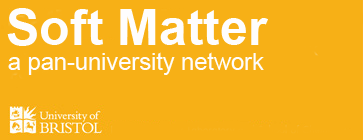
<style>
.page{position:relative;width:363px;height:140px;background:#f7b016}
.page>*{position:absolute;margin:0}
.t1{font:50px "Arial-BoldMT";color:#fefdfd}
.t2{font:23.6px "ArialMT";color:#fefdfd}
</style>
<div class="page">
<p class="t1" style="left:7px;top:8px;width:261px;height:38px">Soft Matter</p>
<p class="t2" style="left:8px;top:52px;width:256px;height:23px">a pan-university network</p>
</div>
